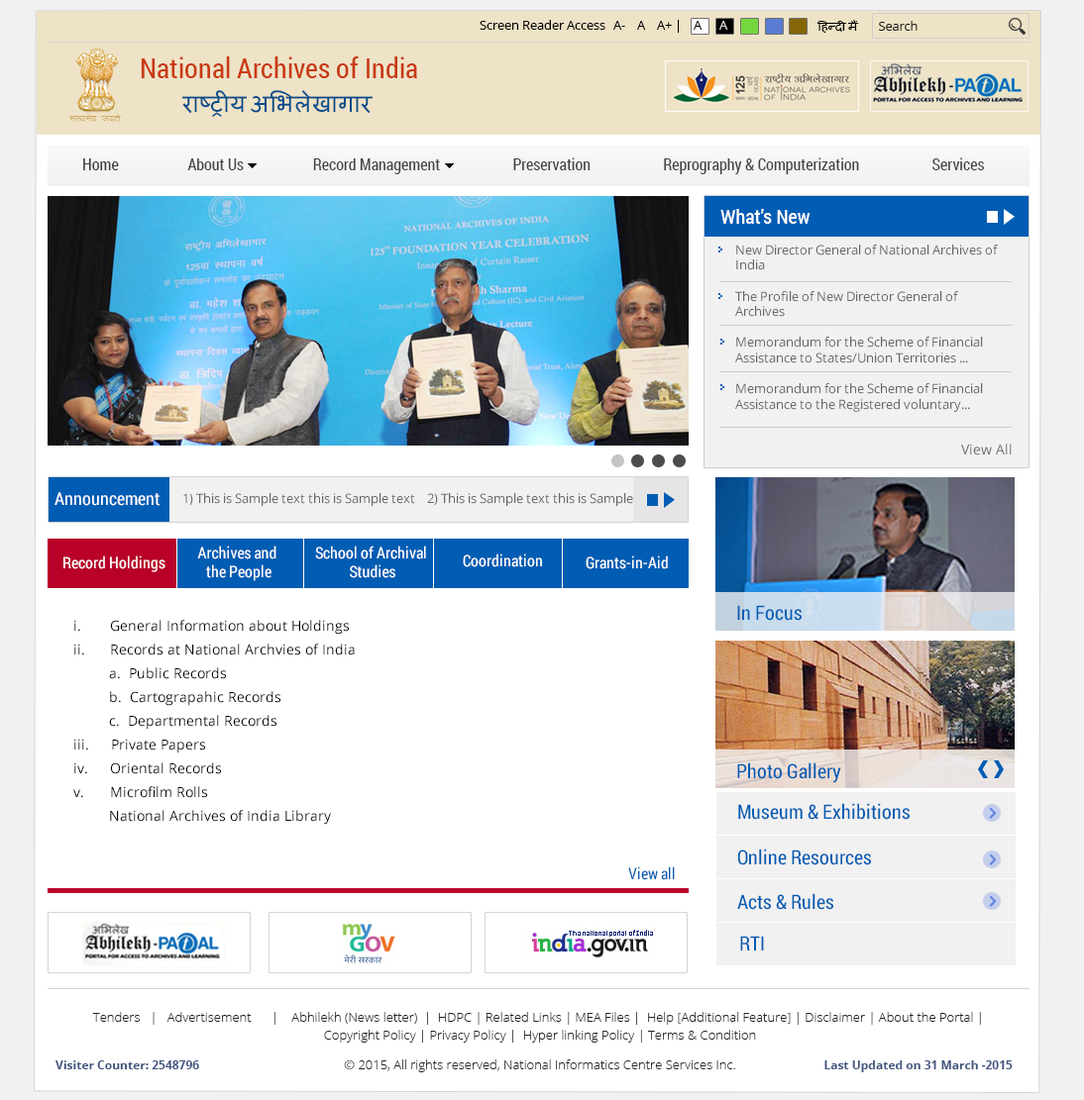
<style>
.page{position:relative;width:1084px;height:1100px;background:#ffffff}
.page>*{position:absolute;margin:0}
.t1{font:12.9px "OpenSans";color:#000000}
.t2{font:12.9px "OpenSans";color:#d5d5d5}
.t3{font:12.9px "Mangal-Regular";color:#000000}
.t4{font:12.9px "OpenSans";color:#1d1d1d}
.t5{font:27.7px "RobotoCondensed-Regular";color:#c93912}
.t6{font:23.8px "Mangal-Regular";color:#024c8b;text-transform:uppercase}
.t7{font:11.9px "KrutiDev010";color:#d2ab67}
.t8{font:15.8px "RobotoCondensed-Regular";color:#434343}
.t9{font:15.8px "RobotoCondensed-Regular";color:#3e3d3d}
.t10{font:19.8px "RobotoCondensed-Regular";color:#ffffff}
.t11{font:12.9px "OpenSans";color:#666666}
.t12{font:13.9px "OpenSans";color:#666666}
.t13{font:17.8px "RobotoCondensed-Regular";color:#ffffff}
.t14{font:15.8px "RobotoCondensed-Regular";color:#ffffff}
.t15{font:19.8px "RobotoCondensed-Regular";color:#005db3}
.t16{font:13.9px/23.8px "OpenSans";color:#000000}
.t17{font:15.8px "RobotoCondensed-Regular";color:#005db3}
.t18{font:12.9px/17.8px "OpenSans-Light";color:#212528}
.t19{font:12.9px/29.7px "OpenSans-Light";color:#212528}
.t20{font:11.9px "OpenSans-Bold";color:#405480}
.t21{font:12.9px "OpenSans-Bold";color:#405480}
</style>
<div class="page">
<p class="t1" style="left:479px;top:20px;width:126px;height:10px">Screen Reader Access</p>
<p class="t1" style="left:613px;top:20px;width:115px;height:13px">A-    A    A+ |    A<span class="t2">      A</span></p>
<p class="t3" style="left:816px;top:20px;width:43px;height:13px">हिन्दी मैं</p>
<p class="t4" style="left:879px;top:21px;width:38px;height:10px">Search</p>
<p class="t5" style="left:141px;top:56px;width:276px;height:22px">National Archives of India</p>
<p class="t6" style="left:182px;top:90px;width:190px;height:27px">राष्ट्रीय अभिलेखागार</p>
<p class="t7" style="left:68px;top:113px;width:53px;height:10px">lR;eso t;rs</p>
<p class="t8" style="left:83px;top:157px;width:901px;height:17px"><span class="t9">Home                    </span>About Us                    Record Management                     Preservation                     Reprography &amp; Computerization                     Services</p>
<p class="t10" style="left:720px;top:209px;width:90px;height:15px">What’s New</p>
<p class="t11" style="left:735px;top:245px;width:262px;height:167px">New Director General of National Archives of India<br><br>The Profile of New Director General of Archives<br><br>Memorandum for the Scheme of Financial Assistance to States/Union Territories ...<br><br>Memorandum for the Scheme of Financial Assistance to the Registered voluntary... <br><br>Gazette Notification regarding the constitution of Archival Advisory ...<br><br>eAbhilekh April-June 2014</p>
<p class="t12" style="left:961px;top:444px;width:50px;height:12px">View All</p>
<p class="t13" style="left:54px;top:492px;width:105px;height:14px">Announcement</p>
<p class="t11" style="left:183px;top:493px;width:477px;height:13px">1) This is Sample text this is Sample text    2) This is Sample text this is Sample text</p>
<p class="t14" style="left:197px;top:546px;width:79px;height:35px;text-align:center">Archives and <br>the People</p>
<p class="t14" style="left:315px;top:546px;width:111px;height:32px;text-align:center">School of Archival <br>Studies</p>
<p class="t14" style="left:63px;top:556px;width:102px;height:17px">Record Holdings</p>
<p class="t14" style="left:463px;top:554px;width:79px;height:14px">Coordination</p>
<p class="t14" style="left:585px;top:556px;width:83px;height:14px">Grants-in-Aid</p>
<p class="t15" style="left:737px;top:605px;width:64px;height:16px">In Focus</p>
<p class="t16" style="left:73px;top:620px;width:282px;height:205px">i.  General Information about Holdings<br>ii. Records at National Archvies of India<br> a.  Public Records<br> b.  Cartograpahic Records<br> c.  Departmental Records<br>iii. Private Papers<br>iv. Oriental Records<br>v.  Microfilm Rolls<br> National Archives of India Library</p>
<p class="t15" style="left:737px;top:763px;width:104px;height:20px">Photo Gallery</p>
<p class="t15" style="left:738px;top:803px;width:171px;height:17px">Museum &amp; Exhibitions</p>
<p class="t15" style="left:738px;top:849px;width:133px;height:17px">Online Resources</p>
<p class="t17" style="left:628px;top:867px;width:47px;height:14px">View all</p>
<p class="t15" style="left:737px;top:893px;width:96px;height:17px">Acts &amp; Rules</p>
<p class="t15" style="left:740px;top:936px;width:24px;height:15px">RTI</p>
<p class="t18" style="left:92px;top:1012px;width:889px;height:61px;text-align:center">Tenders   |   Advertisement |    Abhilekh (News letter)  |  HDPC | Related Links | MEA Files |  Help [Additional Feature] | Disclaimer | About the Portal | <br>Copyright Policy | Privacy Policy |  Hyper linking Policy | Terms &amp; Condition<br> <span class="t19">© 2015, All rights reserved, National Informatics Centre Services Inc.</span></p>
<p class="t20" style="left:55px;top:1061px;width:144px;height:9px">Visiter Counter: 2548796</p>
<p class="t20" style="left:824px;top:1061px;width:188px;height:12px"><span class="t21"> </span>Last Updated on 31 March -2015</p>
</div>
